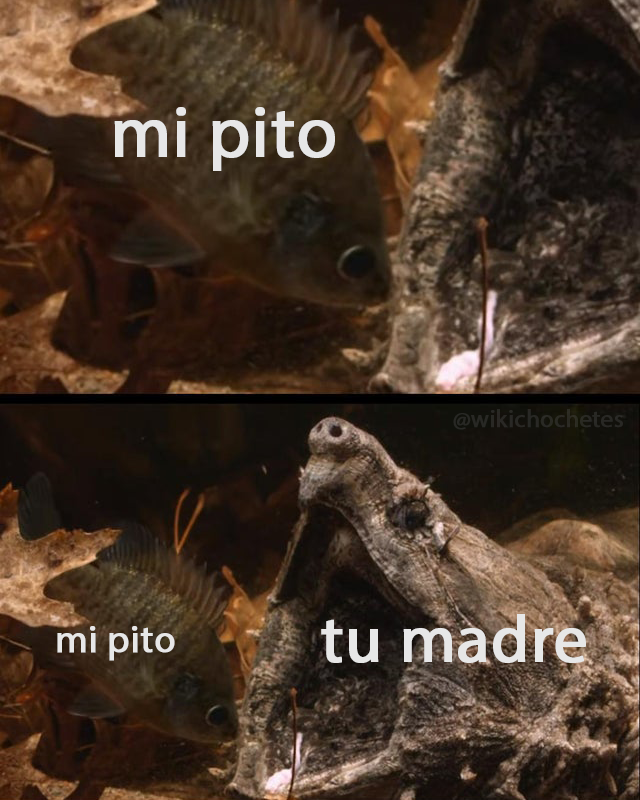
<style>
.page{position:relative;width:640px;height:800px}
.page>*{position:absolute;margin:0}
.t1{font:72px "MyriadPro-Regular";color:#e7e7e7;font-weight:bold}
.t2{font:24.2px "MyriadPro-Regular";color:#292824;font-weight:bold}
.t3{font:66.9px "MyriadPro-Regular";color:#e7e7e7;font-weight:bold}
.t4{font:38.5px "MyriadPro-Regular";color:#e7e7e7;font-weight:bold}
</style>
<div class="page">
<p class="t1" style="left:114px;top:107px;width:221px;height:64px">mi pito</p>
<p class="t2" style="left:453px;top:409px;width:170px;height:21px">@wikichochetes</p>
<p class="t3" style="left:321px;top:614px;width:265px;height:49px">tu madre</p>
<p class="t4" style="left:57px;top:626px;width:118px;height:35px">mi pito</p>
</div>
